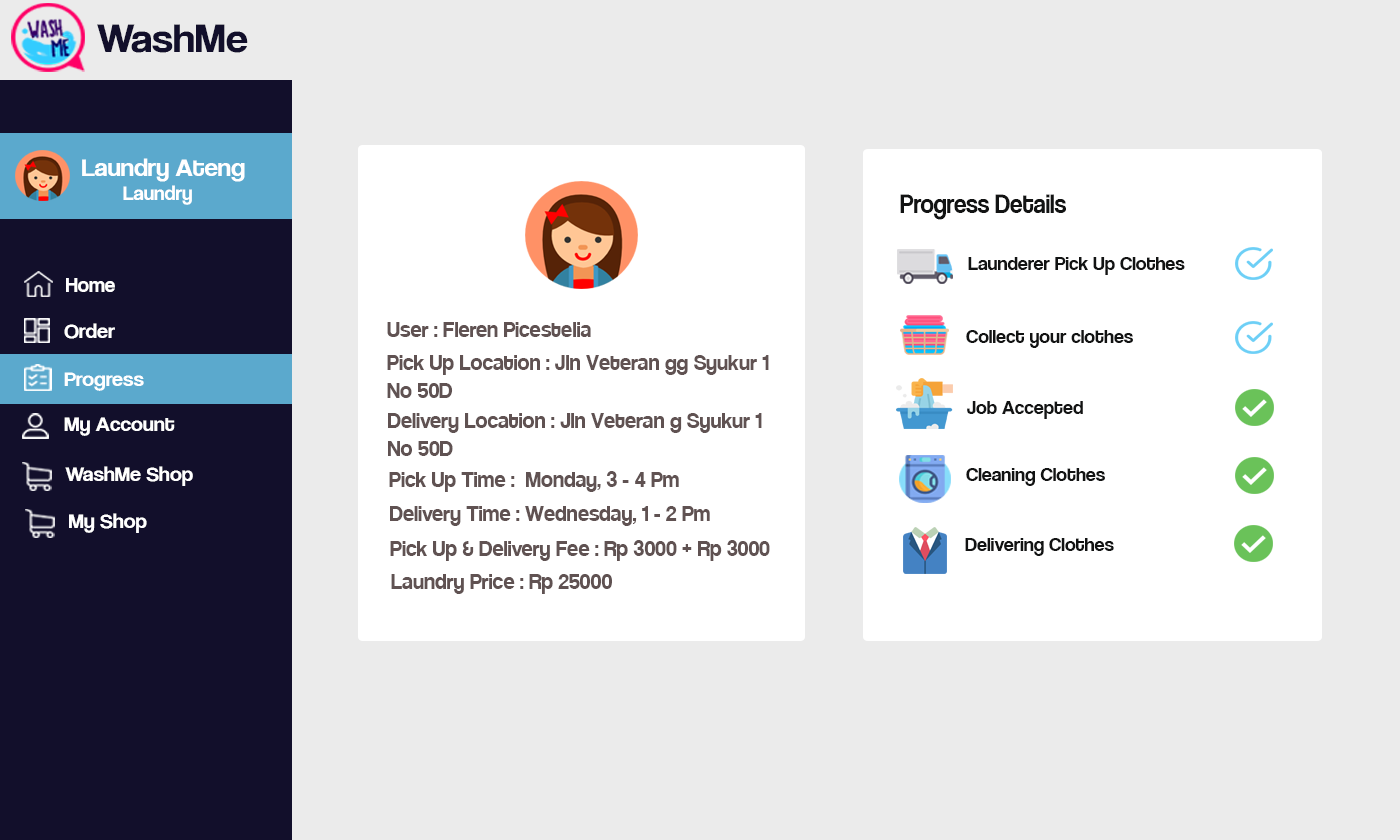
<style>
.page{position:relative;width:1400px;height:840px;background:#ebebeb}
.page>*{position:absolute;margin:0}
.t1{font:42.1px "CoolveticaRg-Regular";color:#120f2b;scale:1.05 1}
.t2{font:25.2px "CoolveticaRg-Regular";color:#ffffff;scale:1.05 1}
.t3{font:20px "CoolveticaRg-Regular";color:#ffffff;scale:1.05 1}
.t4{font:27px "CoolveticaRg-Regular";color:#121313;scale:0.91 1}
.t5{font:20px "CoolveticaRg-Regular";color:#121313}
.t6{font:21px "CoolveticaRg-Regular";color:#ffffff}
.t7{font:21px "CoolveticaRg-Regular";color:#ffffff;scale:1.05 1}
.t8{font:24px "Coolvetica-Regular";color:#605252}
</style>
<div class="page">
<p class="t1" style="left:97px;top:24px;width:151px;height:29px">WashMe</p>
<p class="t2" style="left:82px;top:158px;width:163px;height:47px">Laundry Ateng<br><span class="t3">        Laundry</span></p>
<p class="t4" style="left:900px;top:194px;width:166px;height:26px">Progress Details</p>
<p class="t5" style="left:968px;top:257px;width:217px;height:18px">Launderer Pick Up Clothes</p>
<p class="t6" style="left:66px;top:278px;width:49px;height:14px">Home</p>
<p class="t7" style="left:64px;top:323px;width:51px;height:16px">Order</p>
<p class="t8" style="left:387px;top:322px;width:204px;height:15px">User : Fleren Picestelia</p>
<p class="t5" style="left:966px;top:330px;width:167px;height:18px">Collect your clothes</p>
<p class="t8" style="left:387px;top:355px;width:382px;height:43px">Pick Up Location : Jln Veteran gg Syukur 1 <br>No 50D</p>
<p class="t7" style="left:64px;top:372px;width:80px;height:19px">Progress</p>
<p class="t5" style="left:967px;top:401px;width:116px;height:18px">Job Accepted</p>
<p class="t8" style="left:388px;top:413px;width:374px;height:43px">Delivery Location : Jln Veteran g Syukur 1<br>No 50D</p>
<p class="t7" style="left:64px;top:417px;width:111px;height:19px">My Account</p>
<p class="t7" style="left:65px;top:466px;width:128px;height:20px">WashMe Shop</p>
<p class="t8" style="left:389px;top:471px;width:290px;height:21px">Pick Up Time :  Monday, 3 - 4 Pm</p>
<p class="t5" style="left:966px;top:468px;width:139px;height:18px">Cleaning Clothes</p>
<p class="t8" style="left:390px;top:506px;width:320px;height:20px">Delivery Time : Wednesday, 1 - 2 Pm</p>
<p class="t7" style="left:69px;top:513px;width:78px;height:20px">My Shop</p>
<p class="t8" style="left:390px;top:540px;width:380px;height:21px">Pick Up &amp; Delivery Fee : Rp 3000 + Rp 3000</p>
<p class="t5" style="left:965px;top:538px;width:149px;height:18px">Delivering Clothes</p>
<p class="t8" style="left:391px;top:574px;width:221px;height:20px">Laundry Price : Rp 25000</p>
</div>
